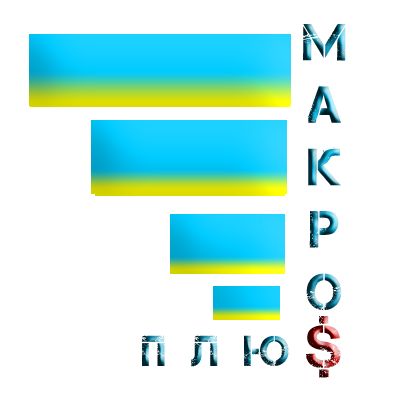
<style>
.page{position:relative;width:400px;height:400px;background:#ffffff}
.page>*{position:absolute;margin:0}
.t1{font:52px "Captureit"}
.t2{font:61px "Captureit"}
.t3{font:43px "Captureit"}
</style>
<div class="page">
<p class="t1" style="left:303px;top:23px;width:43px;height:288px;text-align:center">М<br>А<br>К<br>Р<br>О</p>
<p class="t2" style="left:305px;top:315px;width:36px;height:63px">$</p>
<p class="t3" style="left:141px;top:335px;width:148px;height:32px">П  Л  Ю</p>
</div>
